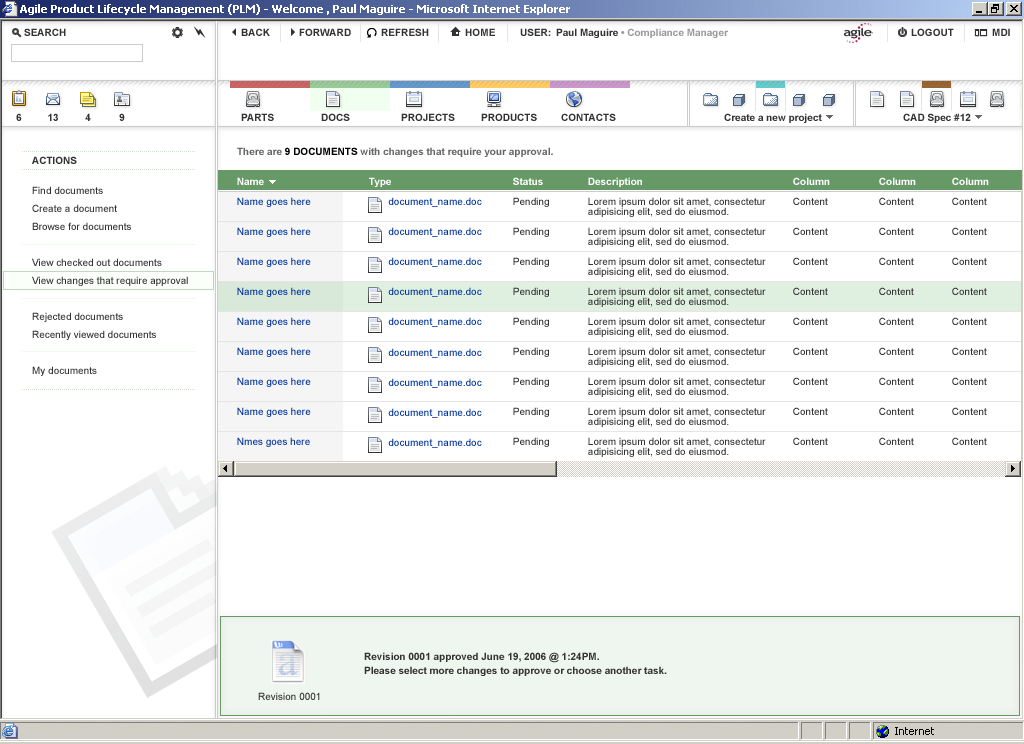
<style>
.page{position:relative;width:1024px;height:744px;background:#ffffff}
.page>*{position:absolute;margin:0}
.t1{font:10px "Arial-BoldMT";color:#666666}
.t2{font:10px "Arial-BoldMT";color:#000000}
.t3{font:10px "Arial-BoldMT";color:#333333}
.t4{font:10px/10px "ArialMT";color:#003399}
.t5{font:10px "Arial-BoldMT";color:#ffffff}
.t6{font:10px/8px "Arial-BoldMT";color:#ffffff}
.t7{font:10px/10px "ArialMT";color:#333333}
.t8{font:10px/18px "ArialMT";color:#333333}
.t9{font:10px/14px "Arial-BoldMT";color:#333333}
.t10{font:10px "ArialMT";color:#333333}
</style>
<div class="page">
<p class="t1" style="left:237px;top:147px;width:316px;height:10px">There are <span class="t2">9 DOCUMENTS </span>with changes that require your approval.</p>
<p class="t3" style="left:32px;top:156px;width:45px;height:8px">ACTIONS</p>
<p class="t4" style="left:237px;top:177px;width:74px;height:150px"><span class="t5">N</span><span class="t6">ame<br><br></span>Name goes here<br><br><br>Name goes here<br><br><br>Name goes here<br><br><br>Name goes here<br><br><br>Name goes here</p>
<p class="t4" style="left:369px;top:177px;width:113px;height:150px"><span class="t5">Type<br><br></span>       document_name.doc<br><br><br>       document_name.doc<br><br><br>       document_name.doc<br><br><br>       document_name.doc<br><br> <br>       document_name.doc</p>
<p class="t7" style="left:513px;top:177px;width:36px;height:150px"><span class="t5">Status<br></span><br>Pending<br><br><br>Pending<br><br><br>Pending<br><br><br>Pending<br><br><br>Pending</p>
<p class="t7" style="left:588px;top:177px;width:178px;height:160px"><span class="t5">De</span><span class="t6">scription<br></span><br>Lorem ipsum dolor sit amet, consectetur <br>adipisicing elit, sed do eiusmod.<br><br>Lorem ipsum dolor sit amet, consectetur <br>adipisicing elit, sed do eiusmod.<br><br>Lorem ipsum dolor sit amet, consectetur <br>adipisicing elit, sed do eiusmod.<br><br>Lorem ipsum dolor sit amet, consectetur <br>adipisicing elit, sed do eiusmod.<br><br>Lorem ipsum dolor sit amet, consectetur <br>adipisicing elit, sed do eiusmod.</p>
<p class="t7" style="left:793px;top:177px;width:37px;height:148px"><span class="t5">Column<br></span><br>Content<br><br><br>Content<br><br><br>Content<br><br><br>Content<br><br><br>Content</p>
<p class="t7" style="left:879px;top:177px;width:37px;height:148px"><span class="t5">Column<br><br></span>Content<br><br><br>Content<br><br><br>Content<br><br><br>Content<br><br><br>Content</p>
<p class="t7" style="left:952px;top:177px;width:37px;height:148px"><span class="t5">Column<br></span><br>Content<br><br><br>Content<br><br><br>Content<br><br><br>Content<br><br><br>Content</p>
<p class="t8" style="left:32px;top:186px;width:156px;height:190px">Find documents<br>Create a document<br>Browse for documents<br><br>View checked out documents<br>View changes that require approval<br><br>Rejected documents<br>Recently viewed documents<br><br>My documents</p>
<p class="t4" style="left:237px;top:347px;width:74px;height:100px"><span class="t6"><br><br></span>Name goes here<br><br><br>Name goes here<br><br><br>Name goes here<br><br><br>Nmes goes here</p>
<p class="t4" style="left:388px;top:348px;width:94px;height:100px"><span class="t5"><br><br></span>       document_name.doc<br><br><br>       document_name.doc<br><br><br>       document_name.doc<br><br><br>       document_name.doc</p>
<p class="t7" style="left:513px;top:347px;width:36px;height:100px"><span class="t5"><br></span><br>Pending<br><br><br>Pending<br><br><br>Pending<br><br><br>Pending</p>
<p class="t7" style="left:588px;top:347px;width:178px;height:110px"><span class="t6"><br></span><br>Lorem ipsum dolor sit amet, consectetur <br>adipisicing elit, sed do eiusmod.<br><br>Lorem ipsum dolor sit amet, consectetur <br>adipisicing elit, sed do eiusmod.<br><br>Lorem ipsum dolor sit amet, consectetur <br>adipisicing elit, sed do eiusmod.<br><br>Lorem ipsum dolor sit amet, consectetur <br>adipisicing elit, sed do eiusmod.</p>
<p class="t7" style="left:793px;top:347px;width:35px;height:98px"><span class="t5"><br></span><br>Content<br><br><br>Content<br><br><br>Content<br><br><br>Content</p>
<p class="t7" style="left:879px;top:347px;width:35px;height:98px"><span class="t5"><br><br></span>Content<br><br><br>Content<br><br><br>Content<br><br><br>Content</p>
<p class="t7" style="left:952px;top:347px;width:35px;height:98px"><span class="t5"><br></span><br>Content<br><br><br>Content<br><br><br>Content<br><br><br>Content</p>
<p class="t9" style="left:364px;top:652px;width:303px;height:24px">Revision 0001 approved June 19, 2006 @ 1:24PM.<br>Please select more changes to approve or choose another task.</p>
<p class="t10" style="left:258px;top:692px;width:62px;height:8px">Revision 0001</p>
</div>
